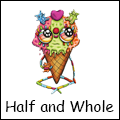
<style>
.page{position:relative;width:120px;height:120px;background:#ffffff}
.page>*{position:absolute;margin:0}
.t1{font:15px "ComicSansMS";color:#000000}
</style>
<div class="page">
<p class="t1" style="left:6px;top:100px;width:108px;height:12px">Half and Whole</p>
</div>
